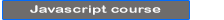
<style>
.page{position:relative;width:224px;height:20px;background:#6e6c6c}
.page>*{position:absolute;margin:0}
.t1{font:10.2px "ArialRoundedMTBold";color:#fcfcfc;scale:1.47 1}
</style>
<div class="page">
<p class="t1" style="left:30px;top:5px;width:131px;height:10px">Javascript course</p>
</div>
